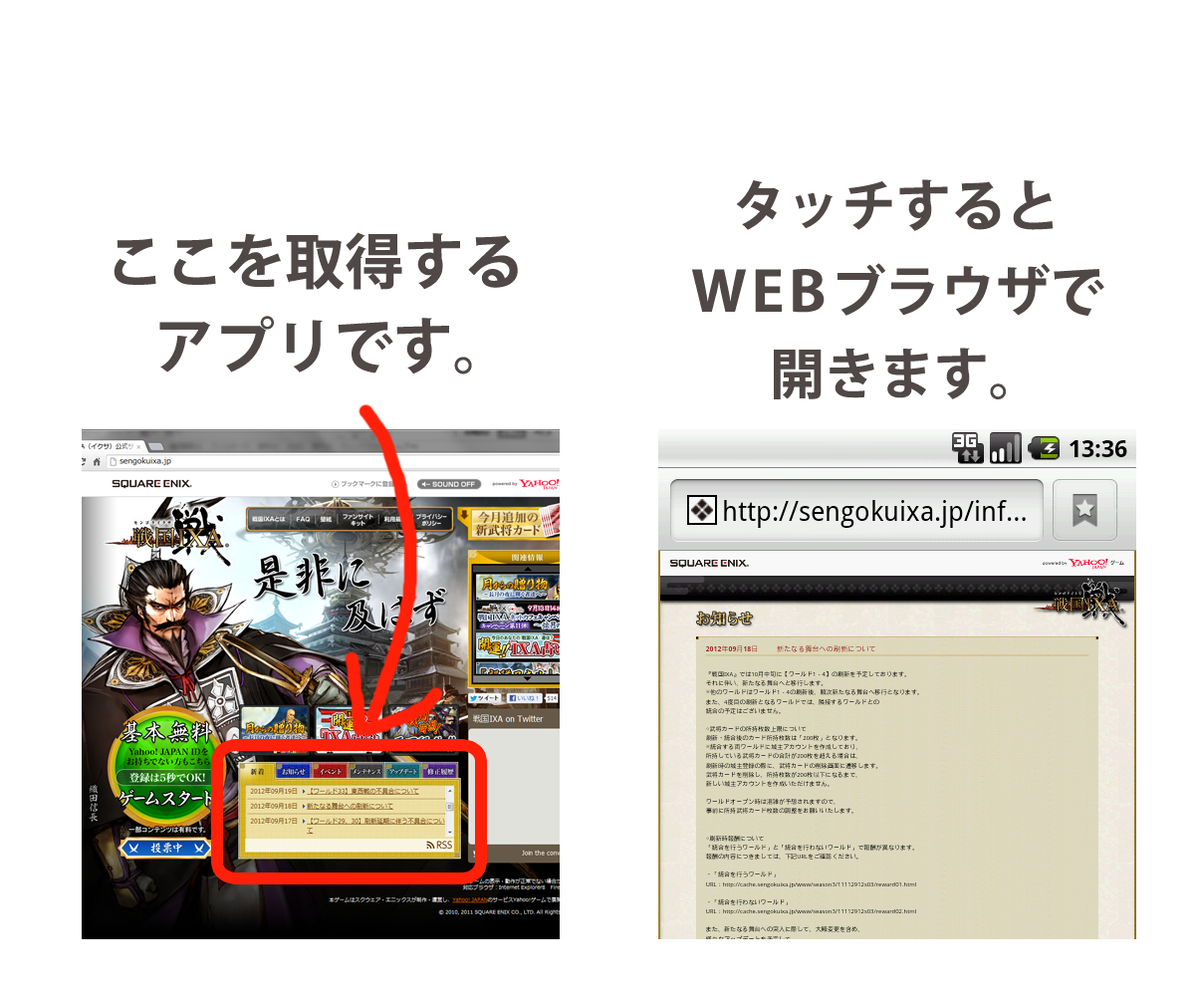
<style>
.page{position:relative;width:1198px;height:996px;background:#ffffff}
.page>*{position:absolute;margin:0}
.t1{font:54.8px "KozGoPro-Bold";color:#504847}
.t2{font:59.7px "KozGoPro-Bold";color:#504847}
.t3{font:54.8px "KozGoPro-Bold";letter-spacing:0.075em;color:#504847;scale:1.1 1}
</style>
<div class="page">
<p class="t1" style="left:736px;top:179px;width:317px;height:52px">タッチすると</p>
<p class="t2" style="left:113px;top:232px;width:405px;height:58px">ここを取得する</p>
<p class="t1" style="left:692px;top:263px;width:412px;height:53px"><span class="t3">WEB</span>ブラウザで</p>
<p class="t2" style="left:159px;top:316px;width:313px;height:58px">アプリです。</p>
<p class="t1" style="left:774px;top:347px;width:232px;height:52px">開きます。</p>
</div>
